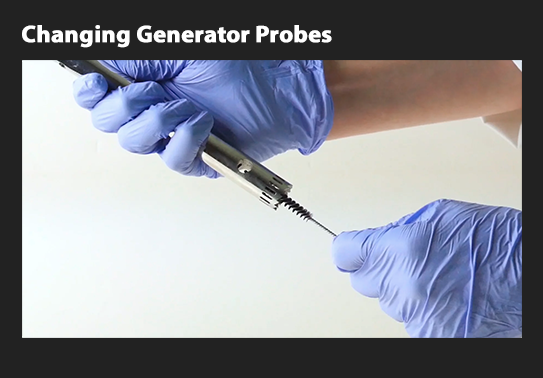
<style>
.page{position:relative;width:543px;height:378px;background:#222222}
.page>*{position:absolute;margin:0}
.t1{font:24px "MyriadPro-Bold";color:#ffffff;font-weight:bold}
</style>
<div class="page">
<p class="t1" style="left:22px;top:25px;width:310px;height:23px">Changing Generator Probes</p>
</div>
